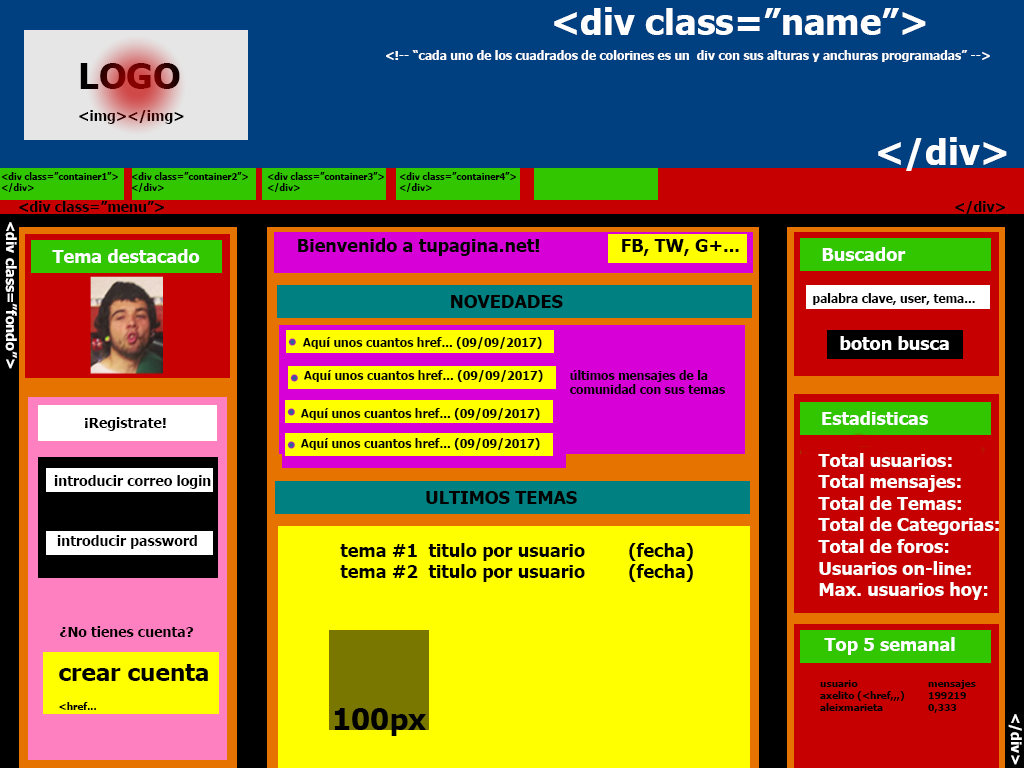
<style>
.page{position:relative;width:1024px;height:768px}
.page>*{position:absolute;margin:0}
.t1{font:36px "Tahoma-Bold";color:#ffffff}
.t2{font:12px "Tahoma-Bold";color:#ffffff}
.t3{font:36px "Tahoma-Bold"}
.t4{font:14px "Tahoma-Bold"}
.t5{font:9px "Tahoma-Bold";color:#000000}
.t6{font:14px "Tahoma-Bold";color:#000000}
.t7{font:14px "Tahoma-Bold";color:#ffffff}
.t8{font:18px "Tahoma-Bold";color:#000000}
.t9{font:18px "Tahoma-Bold";color:#ffffff}
.t10{font:12px "Tahoma-Bold";color:#000000}
.t11{font:24px "Tahoma-Bold";color:#000000}
.t12{font:10px "Tahoma-Bold";color:#000000}
.t13{font:30px "Tahoma-Bold";color:#000000}
</style>
<div class="page">
<p class="t1" style="left:554px;top:7px;width:453px;height:164px">&lt;div class=”name”&gt;<br><br><br>         &lt;/div&gt;</p>
<p class="t2" style="left:386px;top:50px;width:604px;height:12px">&lt;!-- “cada uno de los cuadrados de colorines es un  div con sus alturas y anchuras programadas” --&gt;</p>
<p class="t3" style="left:80px;top:63px;width:100px;height:26px">LOGO</p>
<p class="t4" style="left:79px;top:110px;width:105px;height:14px">&lt;img&gt;&lt;/img&gt;</p>
<p class="t5" style="left:1px;top:172px;width:117px;height:20px">&lt;div class=”container1”&gt;<br>&lt;/div&gt;</p>
<p class="t5" style="left:131px;top:172px;width:117px;height:20px">&lt;div class=”container2”&gt;<br>&lt;/div&gt;</p>
<p class="t5" style="left:267px;top:172px;width:117px;height:20px">&lt;div class=”container3”&gt;<br>&lt;/div&gt;</p>
<p class="t5" style="left:399px;top:172px;width:117px;height:20px">&lt;div class=”container4”&gt;<br>&lt;/div&gt;</p>
<p class="t6" style="left:19px;top:201px;width:986px;height:13px">&lt;div class=”menu”&gt;                      &lt;/div&gt;</p>
<p class="t7" style="left:5px;top:222px;width:12px;height:147px;rotate:90deg">&lt;div class=”fondo”&gt;</p>
<p class="t8" style="left:298px;top:238px;width:441px;height:18px">Bienvenido a tupagina.net!    FB, TW, G+...</p>
<p class="t9" style="left:52px;top:249px;width:148px;height:14px">Tema destacado</p>
<p class="t9" style="left:822px;top:247px;width:84px;height:14px">Buscador</p>
<p class="t10" style="left:813px;top:293px;width:162px;height:12px">palabra clave, user, tema...</p>
<p class="t8" style="left:451px;top:295px;width:112px;height:13px">NOVEDADES</p>
<p class="t10" style="left:302px;top:337px;width:240px;height:12px">Aquí unos cuantos href... (09/09/2017)</p>
<p class="t9" style="left:840px;top:336px;width:109px;height:14px">boton busca</p>
<p class="t10" style="left:303px;top:370px;width:240px;height:12px">Aquí unos cuantos href... (09/09/2017)</p>
<p class="t10" style="left:570px;top:370px;width:155px;height:24px">últimos mensajes de la<br>comunidad con sus temas</p>
<p class="t10" style="left:300px;top:408px;width:240px;height:12px">Aquí unos cuantos href... (09/09/2017)</p>
<p class="t9" style="left:822px;top:411px;width:106px;height:14px">Estadisticas</p>
<p class="t6" style="left:85px;top:417px;width:81px;height:14px">¡Registrate!</p>
<p class="t10" style="left:300px;top:438px;width:240px;height:12px">Aquí unos cuantos href... (09/09/2017)</p>
<p class="t9" style="left:818px;top:453px;width:181px;height:147px">Total usuarios:<br>Total mensajes:<br>Total de Temas:<br>Total de Categorias:<br>Total de foros:<br>Usuarios on-line:<br>Max. usuarios hoy:</p>
<p class="t6" style="left:54px;top:475px;width:157px;height:14px">introducir correo login</p>
<p class="t8" style="left:426px;top:491px;width:151px;height:13px">ULTIMOS TEMAS</p>
<p class="t6" style="left:57px;top:535px;width:140px;height:14px">introducir password</p>
<p class="t8" style="left:340px;top:543px;width:353px;height:39px">tema #1  titulo por usuario  (fecha)<br>tema #2  titulo por usuario  (fecha)</p>
<p class="t6" style="left:60px;top:626px;width:134px;height:11px">¿No tienes cuenta?</p>
<p class="t9" style="left:824px;top:637px;width:131px;height:18px">Top 5 semanal</p>
<p class="t11" style="left:59px;top:664px;width:149px;height:17px">crear cuenta</p>
<p class="t12" style="left:820px;top:680px;width:156px;height:33px">usuario  mensajes<br>axelito (&lt;href,,,) 199219<br>aleixmarieta  0,333</p>
<p class="t12" style="left:59px;top:702px;width:37px;height:8px">&lt;href...</p>
<p class="t13" style="left:334px;top:708px;width:93px;height:28px">100px</p>
<p class="t7" style="left:1008px;top:714px;width:14px;height:51px;rotate:90deg">&lt;/div&gt;</p>
</div>
